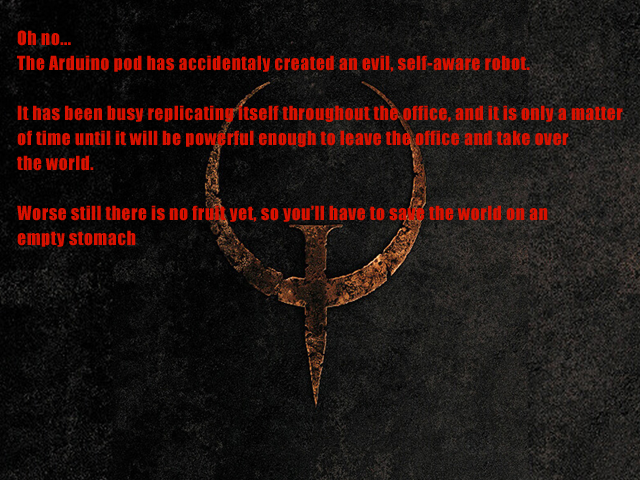
<style>
.page{position:relative;width:640px;height:480px}
.page>*{position:absolute;margin:0}
.t1{font:18px/25px "Impact";letter-spacing:0.025em;color:#d81100}
</style>
<div class="page">
<p class="t1" style="left:17px;top:30px;width:606px;height:217px">Oh no... <br>The Arduino pod has accidentaly created an evil, self-aware robot.<br><br>It has been busy replicating itself throughout the office, and it is only a matter<br>of time until it will be powerful enough to leave the office and take over<br>the world.<br><br>Worse still there is no fruit yet, so you’ll have to save the world on an <br>empty stomach</p>
</div>
